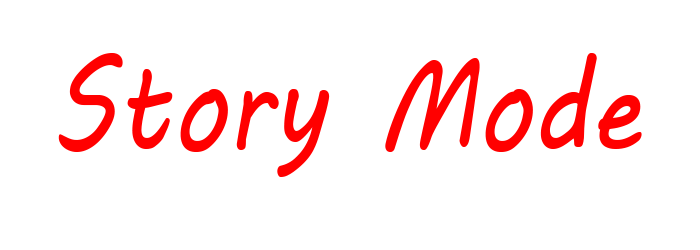
<style>
.page{position:relative;width:700px;height:250px;background:#ffffff}
.page>*{position:absolute;margin:0}
.t1{font:125px "MVBoli";color:#ff0000;scale:0.84 1}
</style>
<div class="page">
<p class="t1" style="left:58px;top:53px;width:584px;height:124px">Story Mode</p>
</div>
